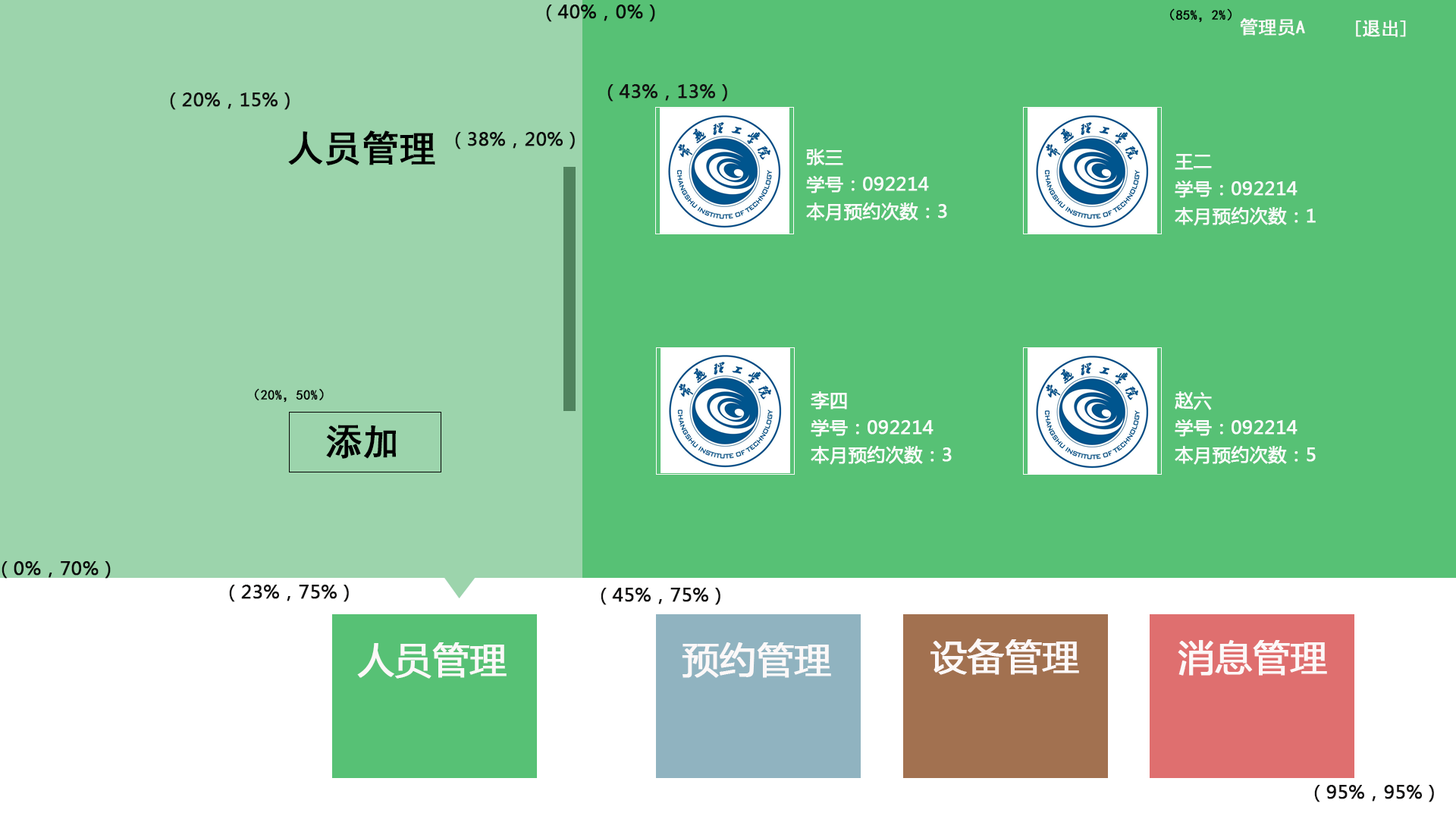
<style>
.page{position:relative;width:1456px;height:819px;background:#57c175}
.page>*{position:absolute;margin:0}
.t1{font:18.2px "MicrosoftYaHei";color:#0b0b0b;font-weight:bold}
.t2{font:13.6px "SimHei";color:#000000;font-weight:bold}
.t3{font:18.2px "SimHei";color:#fcfafa;font-weight:bold}
.t4{font:18.2px "MicrosoftYaHei";color:#121111;font-weight:bold}
.t5{font:36.4px "SimHei";color:#000000;font-weight:bold}
.t6{font:18.2px "MicrosoftYaHei";color:#0e0e0e;font-weight:bold}
.t7{font:18.2px/27.3px "MicrosoftYaHei";color:#fafbfa;font-weight:bold}
.t8{font:18.2px/27.3px "MicrosoftYaHei";color:#f8faf9;font-weight:bold}
.t9{font:18.2px/27.3px "MicrosoftYaHei";color:#fcfcfc;font-weight:bold}
.t10{font:36.4px "MicrosoftYaHei";color:#fcf8f8;font-weight:bold}
</style>
<div class="page">
<p class="t1" style="left:546px;top:5px;width:109px;height:17px">（40%，0%）</p>
<p class="t2" style="left:1169px;top:8px;width:63px;height:15px">（85%，2%）</p>
<p class="t3" style="left:1240px;top:18px;width:65px;height:18px">管理员A</p>
<p class="t3" style="left:1356px;top:20px;width:50px;height:17px">[退出]</p>
<p class="t4" style="left:607px;top:84px;width:120px;height:18px">（43%，13%）</p>
<p class="t4" style="left:170px;top:93px;width:120px;height:17px">（20%，15%）</p>
<p class="t5" style="left:288px;top:130px;width:147px;height:35px">人员管理</p>
<p class="t6" style="left:455px;top:132px;width:120px;height:17px">（38%，20%）</p>
<p class="t7" style="left:806px;top:149px;width:141px;height:72px">张三<br>学号：092214<br>本月预约次数：3</p>
<p class="t8" style="left:1175px;top:154px;width:141px;height:72px">王二<br>学号：092214<br>本月预约次数：1</p>
<p class="t2" style="left:254px;top:388px;width:70px;height:15px">（20%，50%）</p>
<p class="t9" style="left:811px;top:391px;width:141px;height:74px">李四<br>学号：092214<br>本月预约次数：3</p>
<p class="t9" style="left:1175px;top:391px;width:141px;height:74px">赵六<br>学号：092214<br>本月预约次数：5</p>
<p class="t5" style="left:326px;top:425px;width:70px;height:34px">添加</p>
<p class="t1" style="left:2px;top:561px;width:109px;height:18px">（0%，70%）</p>
<p class="t4" style="left:229px;top:585px;width:120px;height:17px">（23%，75%）</p>
<p class="t4" style="left:601px;top:588px;width:119px;height:17px">（45%，75%）</p>
<p class="t10" style="left:930px;top:639px;width:149px;height:36px">设备管理</p>
<p class="t10" style="left:1178px;top:640px;width:149px;height:36px">消息管理</p>
<p class="t10" style="left:357px;top:642px;width:150px;height:37px">人员管理</p>
<p class="t10" style="left:682px;top:642px;width:149px;height:36px">预约管理</p>
<p class="t4" style="left:1314px;top:785px;width:120px;height:17px">（95%，95%）</p>
</div>
